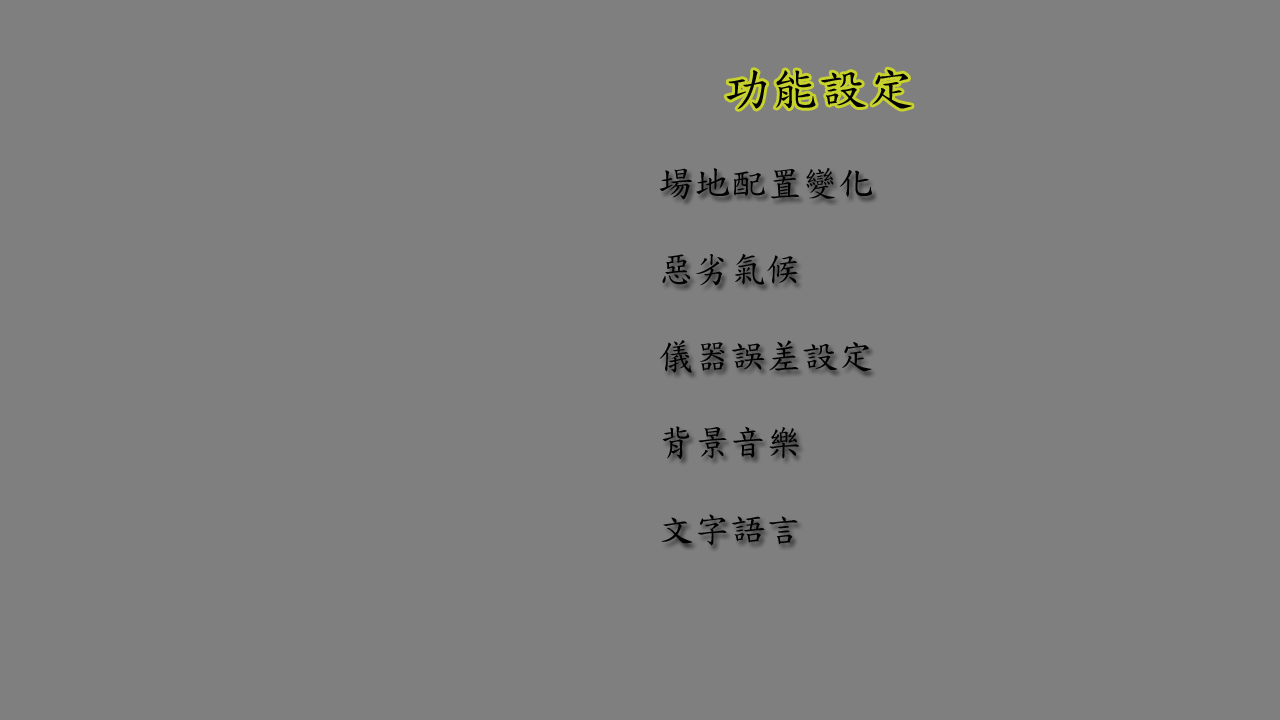
<style>
.page{position:relative;width:1280px;height:720px;background:#7f7f7f}
.page>*{position:absolute;margin:0}
.t1{font:48px "DFKaiShu-SB-Estd-BF";color:#000000}
.t2{font:30px "ArialMT";color:#000000}
.t3{font:36px "DFKaiShu-SB-Estd-BF";color:#000000}
</style>
<div class="page">
<p class="t1" style="left:726px;top:69px;width:186px;height:40px"><span class="t2">        </span>功能設定</p>
<p class="t3" style="left:659px;top:167px;width:213px;height:379px">場地配置變化    <br><br>惡劣氣候        <br><br>儀器誤差設定    <br><br>背景音樂        <br><br>文字語言</p>
</div>
